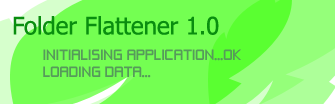
<style>
.page{position:relative;width:335px;height:104px;background:#74ff52}
.page>*{position:absolute;margin:0}
.t1{font:24px "Tahoma";color:#098e0f}
.t2{font:14px "ZeroThrees";color:#569b5a}
</style>
<div class="page">
<p class="t1" style="left:13px;top:16px;width:206px;height:19px">Folder Flattener 1.0</p>
<p class="t2" style="left:43px;top:49px;width:198px;height:29px">INITIALISING APPLICATION...OK<br>LOADING DATA...</p>
</div>
